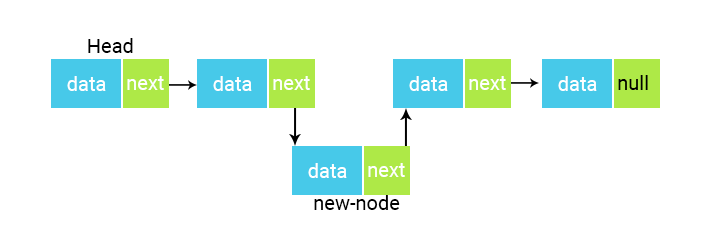
<style>
.page{position:relative;width:719px;height:239px;background:#ffffff}
.page>*{position:absolute;margin:0}
.t1{font:20px "Roboto-Regular";color:#000000}
.t2{font:20px "Roboto-Regular";color:#ffffff}
.t3{font:20px "Roboto-Regular";color:#010101}
</style>
<div class="page">
<p class="t1" style="left:88px;top:38px;width:45px;height:15px">Head</p>
<p class="t2" style="left:67px;top:76px;width:39px;height:15px">data</p>
<p class="t2" style="left:127px;top:76px;width:37px;height:14px">next</p>
<p class="t2" style="left:213px;top:76px;width:39px;height:15px">data</p>
<p class="t2" style="left:273px;top:76px;width:37px;height:14px">next</p>
<p class="t2" style="left:409px;top:76px;width:39px;height:15px">data</p>
<p class="t2" style="left:469px;top:76px;width:37px;height:14px">next</p>
<p class="t2" style="left:558px;top:76px;width:39px;height:15px">data</p>
<p class="t3" style="left:618px;top:75px;width:30px;height:15px">null</p>
<p class="t2" style="left:308px;top:163px;width:39px;height:15px">data</p>
<p class="t2" style="left:368px;top:163px;width:37px;height:14px">next</p>
<p class="t1" style="left:314px;top:195px;width:86px;height:15px">new-node</p>
</div>
